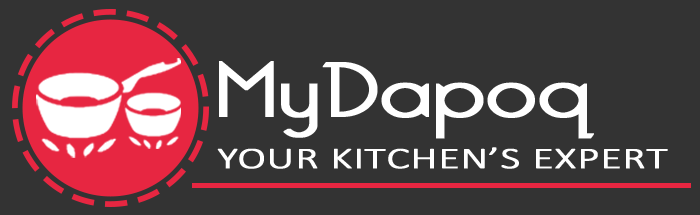
<style>
.page{position:relative;width:700px;height:215px;background:#333333}
.page>*{position:absolute;margin:0}
.t1{font:75.4px "BelleroseLight";letter-spacing:0.01em;color:#ffffff;font-weight:bold;scale:1.3 1}
.t2{font:30.2px "Calibri-Light";color:#ffffff;font-weight:bold;scale:1.43 1}
</style>
<div class="page">
<p class="t1" style="left:219px;top:61px;width:375px;height:78px">MyDapoq</p>
<p class="t2" style="left:217px;top:147px;width:451px;height:22px">YOUR KITCHEN’S EXPERT</p>
</div>
